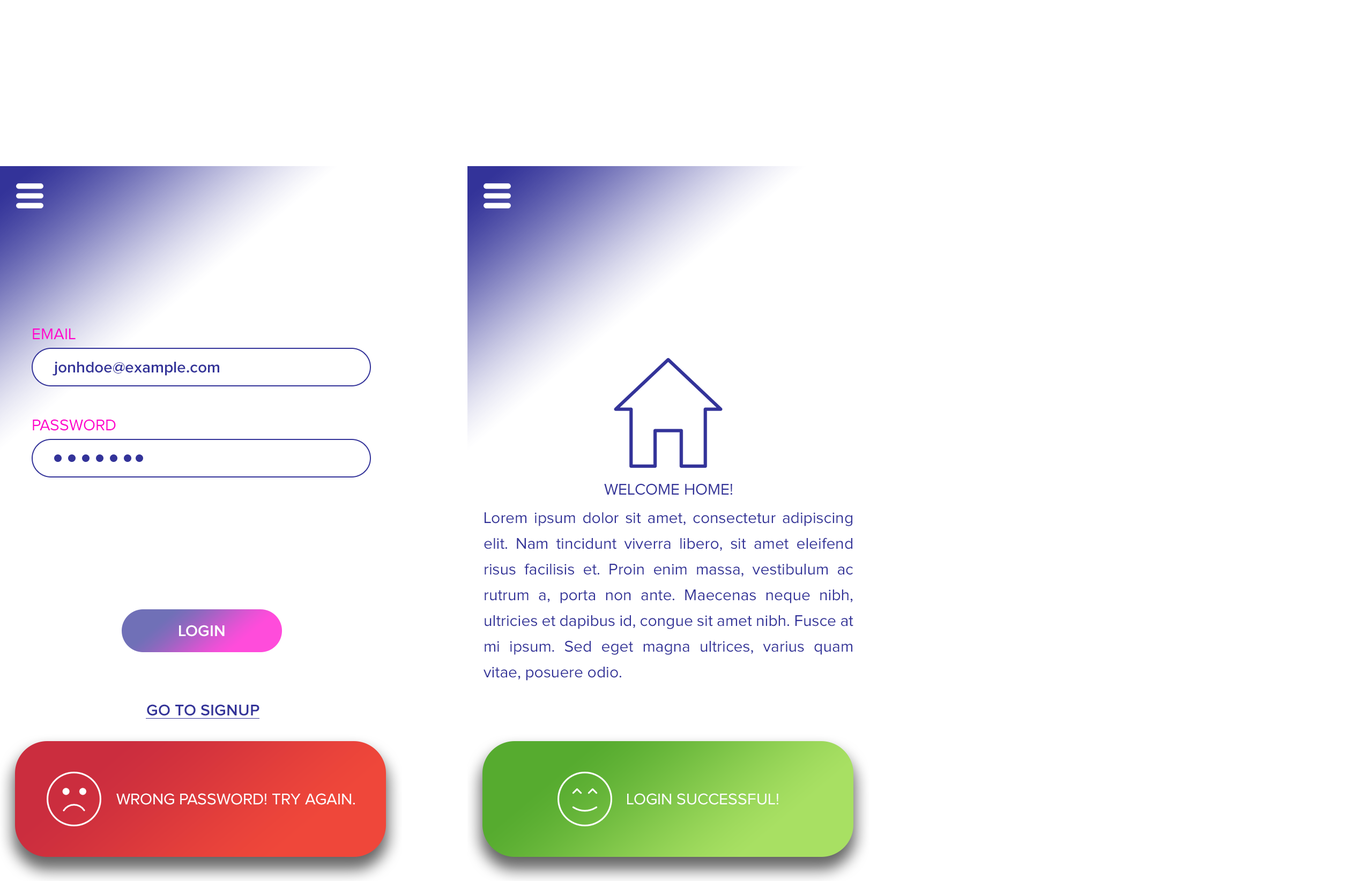
<style>
.page{position:relative;width:1353px;height:881px;background:#ffffff}
.page>*{position:absolute;margin:0}
.t1{font:16.1px "ProximaNova-Regular";color:#ff00cc}
.t2{font:16.1px "ProximaNova-Semibold";color:#333399}
.t3{font:16.1px "ProximaNova-Regular";color:#333399}
.t4{font:16.1px/25.7px "ProximaNova-Regular";color:#333399}
.t5{font:16.1px "ProximaNova-Semibold";color:#fefeff}
.t6{font:16.1px "ProximaNova-Regular";color:#fefefe}
</style>
<div class="page">
<p class="t1" style="left:33px;top:329px;width:43px;height:10px">EMAIL</p>
<p class="t2" style="left:53px;top:361px;width:166px;height:15px">jonhdoe@example.com</p>
<p class="t1" style="left:33px;top:419px;width:83px;height:12px">PASSWORD</p>
<p class="t3" style="left:604px;top:484px;width:128px;height:11px">WELCOME HOME!</p>
<p class="t4" style="left:484px;top:512px;width:369px;height:169px;text-align:justify">Lorem ipsum dolor sit amet, consectetur adipiscing elit. Nam tincidunt viverra libero, sit amet eleifend risus facilisis et. Proin enim massa, vestibulum ac rutrum a, porta non ante. Maecenas neque nibh, ultricies et dapibus id, congue sit amet nibh. Fusce at mi ipsum. Sed eget magna ultrices, varius quam vitae, posuere odio.</p>
<p class="t5" style="left:179px;top:625px;width:46px;height:12px">LOGIN</p>
<p class="t2" style="left:147px;top:704px;width:112px;height:12px">GO TO SIGNUP</p>
<p class="t6" style="left:116px;top:793px;width:239px;height:12px">WRONG PASSWORD! TRY AGAIN.</p>
<p class="t6" style="left:627px;top:793px;width:151px;height:12px">LOGIN SUCCESSFUL!</p>
</div>
